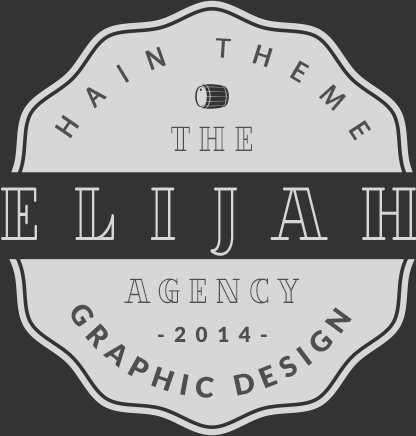
<style>
.page{position:relative;width:416px;height:436px;background:#d7d7d7}
.page>*{position:absolute;margin:0}
.t1{font:28.1px "MyriadPro-Regular";letter-spacing:0.75em;color:#4f4f4f;text-transform:uppercase;font-weight:bold}
.t2{font:34.8px "VillaDidot-Outline";letter-spacing:0.3em;color:#4f4f4f;scale:0.77 1}
.t3{font:75px "VillaDidot-Outline";letter-spacing:0.56em;color:#d7d6d6;scale:0.77 1}
.t4{font:28.1px "Lato-Black";letter-spacing:0.3em;color:#4f4f4f;text-transform:uppercase}
.t5{font:20.9px "Lato-Black";letter-spacing:0.45em;color:#4f4f4f;text-transform:uppercase}
</style>
<div class="page">
<p class="t1" style="left:55px;top:38px;width:316px;height:103px">HAIN THEME</p>
<p class="t2" style="left:171px;top:126px;width:81px;height:25px">THE</p>
<p class="t3" style="left:1px;top:187px;width:416px;height:69px">ELIJAH</p>
<p class="t2" style="left:124px;top:278px;width:175px;height:26px">AGENCY</p>
<p class="t4" style="left:71px;top:304px;width:281px;height:94px">GRAPHIC DESIGN</p>
<p class="t5" style="left:158px;top:326px;width:109px;height:16px">-2014-</p>
</div>
